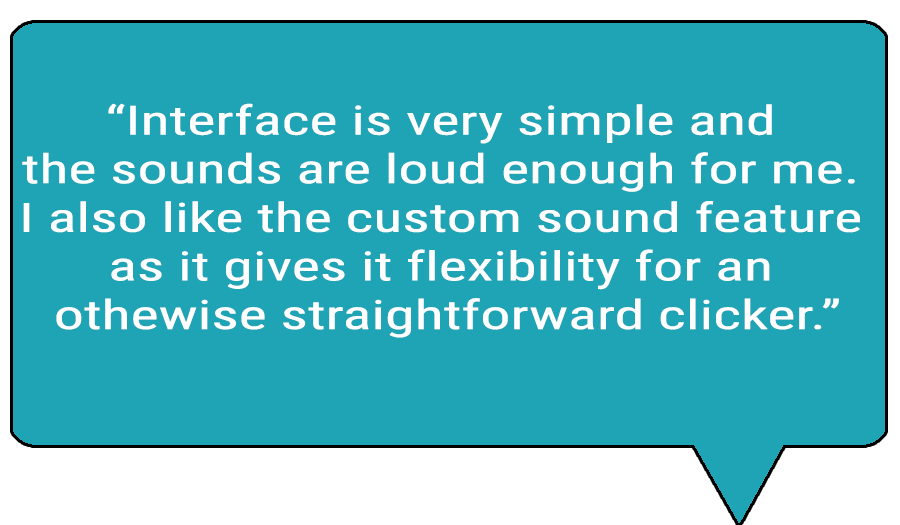
<style>
.page{position:relative;width:900px;height:525px;background:#1fa4b6}
.page>*{position:absolute;margin:0}
.t1{font:40.5px "RobotoCondensed-Regular";color:#ffffff;scale:1.48 1}
</style>
<div class="page">
<p class="t1" style="left:22px;top:103px;width:838px;height:235px;text-align:center">“Interface is very simple and <br>the sounds are loud enough for me. <br>I also like the custom sound feature <br>as it gives it flexibility for an <br>othewise straightforward clicker.”</p>
</div>
